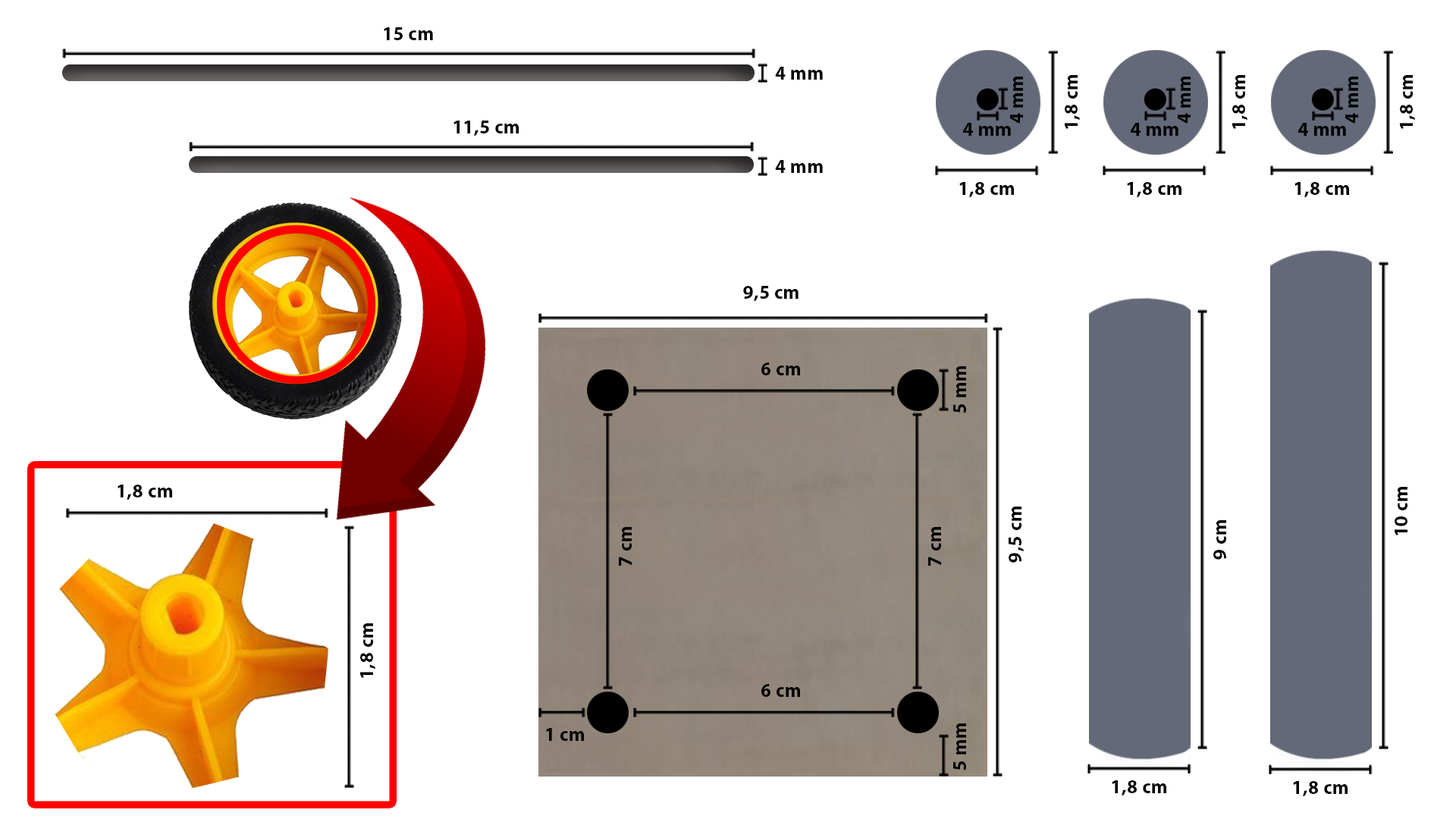
<style>
.page{position:relative;width:1456px;height:819px;background:#ffffff}
.page>*{position:absolute;margin:0}
.t1{font:19.1px "MyriadPro-Bold";letter-spacing:0.02em;color:#000000}
.t2{font:19.2px "MyriadPro-Bold";letter-spacing:0.02em;color:#000000}
</style>
<div class="page">
<p class="t1" style="left:384px;top:27px;width:49px;height:13px">15 cm</p>
<p class="t1" style="left:775px;top:67px;width:48px;height:13px">4 mm</p>
<p class="t1" style="left:1010px;top:77px;width:13px;height:47px;rotate:-90deg">4 mm</p>
<p class="t1" style="left:1065px;top:75px;width:15px;height:54px;rotate:-90deg">1,8 cm</p>
<p class="t1" style="left:1178px;top:77px;width:13px;height:47px;rotate:-90deg">4 mm</p>
<p class="t1" style="left:1232px;top:75px;width:15px;height:54px;rotate:-90deg">1,8 cm</p>
<p class="t1" style="left:1345px;top:77px;width:13px;height:47px;rotate:-90deg">4 mm</p>
<p class="t1" style="left:1400px;top:75px;width:15px;height:54px;rotate:-90deg">1,8 cm</p>
<p class="t1" style="left:453px;top:121px;width:66px;height:15px">11,5 cm</p>
<p class="t1" style="left:963px;top:123px;width:48px;height:13px">4 mm</p>
<p class="t1" style="left:1131px;top:123px;width:47px;height:13px">4 mm</p>
<p class="t1" style="left:1298px;top:123px;width:48px;height:13px">4 mm</p>
<p class="t1" style="left:775px;top:160px;width:48px;height:13px">4 mm</p>
<p class="t1" style="left:959px;top:182px;width:55px;height:15px">1,8 cm</p>
<p class="t1" style="left:1127px;top:182px;width:54px;height:15px">1,8 cm</p>
<p class="t1" style="left:1294px;top:182px;width:55px;height:15px">1,8 cm</p>
<p class="t1" style="left:743px;top:286px;width:56px;height:15px">9,5 cm</p>
<p class="t1" style="left:761px;top:362px;width:39px;height:13px">6 cm</p>
<p class="t1" style="left:953px;top:366px;width:13px;height:47px;rotate:-90deg">5 mm</p>
<p class="t2" style="left:118px;top:485px;width:54px;height:15px">1,8 cm</p>
<p class="t1" style="left:1395px;top:487px;width:12px;height:48px;rotate:-90deg">10 cm</p>
<p class="t1" style="left:1009px;top:507px;width:15px;height:56px;rotate:-90deg">9,5 cm</p>
<p class="t1" style="left:1213px;top:520px;width:13px;height:40px;rotate:-90deg">9 cm</p>
<p class="t1" style="left:619px;top:527px;width:13px;height:39px;rotate:-90deg">7 cm</p>
<p class="t1" style="left:928px;top:527px;width:13px;height:39px;rotate:-90deg">7 cm</p>
<p class="t1" style="left:360px;top:623px;width:15px;height:55px;rotate:-90deg">1,8 cm</p>
<p class="t1" style="left:761px;top:684px;width:39px;height:13px">6 cm</p>
<p class="t1" style="left:953px;top:723px;width:13px;height:47px;rotate:-90deg">5 mm</p>
<p class="t1" style="left:546px;top:728px;width:38px;height:13px">1 cm</p>
<p class="t1" style="left:1112px;top:780px;width:54px;height:15px">1,8 cm</p>
<p class="t1" style="left:1293px;top:781px;width:55px;height:15px">1,8 cm</p>
</div>
